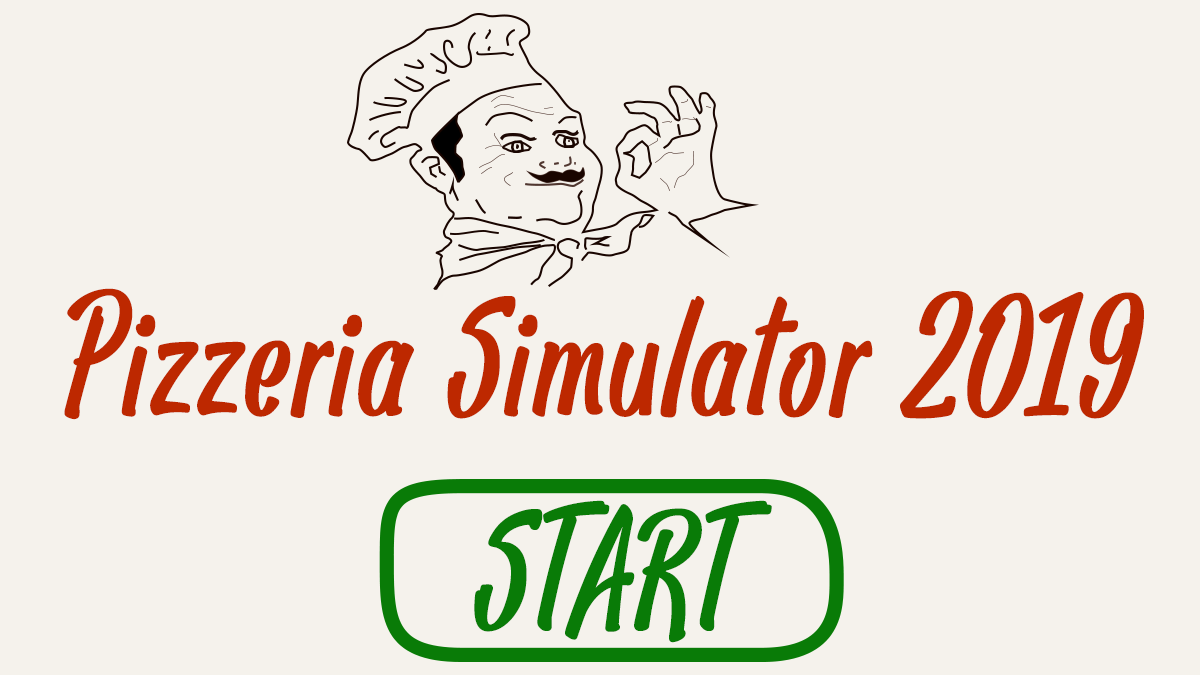
<style>
.page{position:relative;width:1200px;height:675px;background:#f5f2ec}
.page>*{position:absolute;margin:0}
.t1{font:180px "PanPizza";color:#bd2800;font-weight:bold}
.t2{font:180px "PanPizza";color:#097b07;font-weight:bold}
</style>
<div class="page">
<p class="t1" style="left:64px;top:288px;width:1080px;height:132px">Pizzeria Simulator 2019</p>
<p class="t2" style="left:474px;top:500px;width:298px;height:143px">START</p>
</div>
